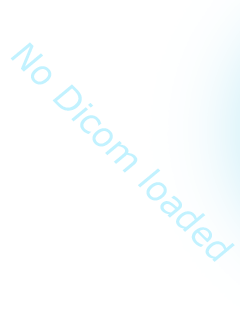
<style>
.page{position:relative;width:240px;height:320px;background:#ffffff}
.page>*{position:absolute;margin:0}
.t1{font:34.9px "Verdana";color:#c2f2ff}
</style>
<div class="page">
<p class="t1" style="left:10px;top:42px;width:225px;height:220px;rotate:45deg">No Dicom loaded</p>
</div>
